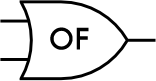
<style>
.page{position:relative;width:156px;height:81px;background:#ffffff}
.page>*{position:absolute;margin:0}
.t1{font:29.4px "LeonSans-Bold";color:#000000}
</style>
<div class="page">
<p class="t1" style="left:50px;top:27px;width:39px;height:23px">OF</p>
</div>
